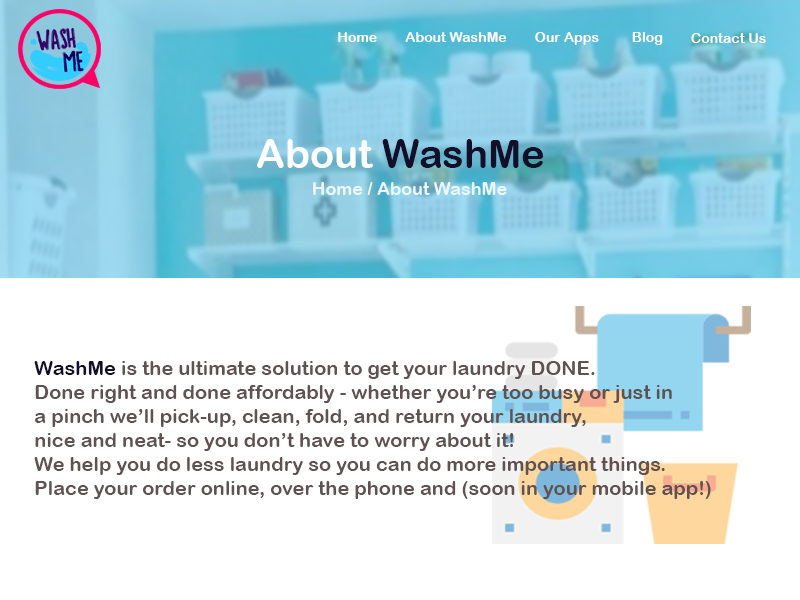
<style>
.page{position:relative;width:800px;height:600px;background:#ffffff}
.page>*{position:absolute;margin:0}
.t1{font:14px "ArialRoundedMTBold";color:#ffffff}
.t2{font:40px "ArialRoundedMTBold";color:#120f2b}
.t3{font:40px "ArialRoundedMTBold";color:#ffffff}
.t4{font:18px "ArialRoundedMTBold";color:#eef8fb}
.t5{font:20px "ArialRoundedMTBold";color:#605252}
.t6{font:20px "ArialRoundedMTBold";color:#120f2b}
</style>
<div class="page">
<p class="t1" style="left:338px;top:32px;width:39px;height:10px">Home</p>
<p class="t1" style="left:405px;top:32px;width:101px;height:10px">About WashMe</p>
<p class="t1" style="left:535px;top:32px;width:64px;height:13px">Our Apps</p>
<p class="t1" style="left:632px;top:32px;width:31px;height:13px">Blog</p>
<p class="t1" style="left:691px;top:33px;width:75px;height:10px">Contact Us</p>
<p class="t2" style="left:257px;top:139px;width:286px;height:29px"><span class="t3">About </span>WashMe</p>
<p class="t4" style="left:313px;top:182px;width:194px;height:13px">Home / About WashMe</p>
<p class="t5" style="left:34px;top:361px;width:677px;height:138px"><span class="t6">WashMe</span> is the ultimate solution to get your laundry DONE. <br>Done right and done affordably - whether you’re too busy or just in <br>a pinch we’ll pick-up, clean, fold, and return your laundry, <br>nice and neat- so you don’t have to worry about it! <br>We help you do less laundry so you can do more important things. <br>Place your order online, over the phone and (soon in your mobile app!)</p>
</div>
